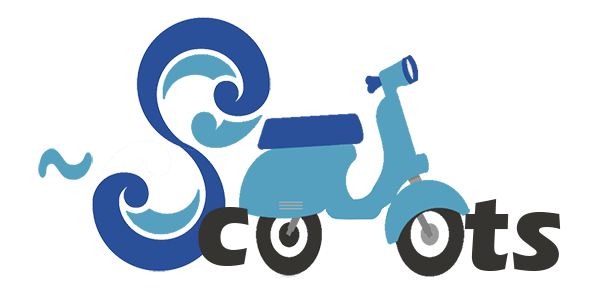
<style>
.page{position:relative;width:600px;height:305px;background:#ffffff}
.page>*{position:absolute;margin:0}
.t1{font:112.7px "ErasITC-Bold";color:#353431}
</style>
<div class="page">
<p class="t1" style="left:198px;top:207px;width:51px;height:59px">c</p>
<p class="t1" style="left:464px;top:199px;width:97px;height:72px">ts</p>
</div>
